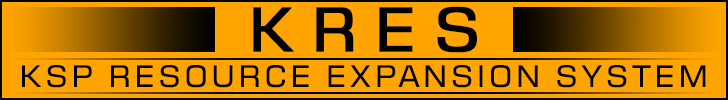
<style>
.page{position:relative;width:728px;height:100px;background:#ffa400}
.page>*{position:absolute;margin:0}
.t1{font:60px "Moire";color:#010101;font-weight:bold}
.t2{font:30px "Moire";letter-spacing:0.125em;color:#010101}
</style>
<div class="page">
<p class="t1" style="left:253px;top:6px;width:224px;height:47px">K R E S</p>
<p class="t2" style="left:22px;top:65px;width:684px;height:23px">KSP RESOURCE EXPANSION SYSTEM</p>
</div>
